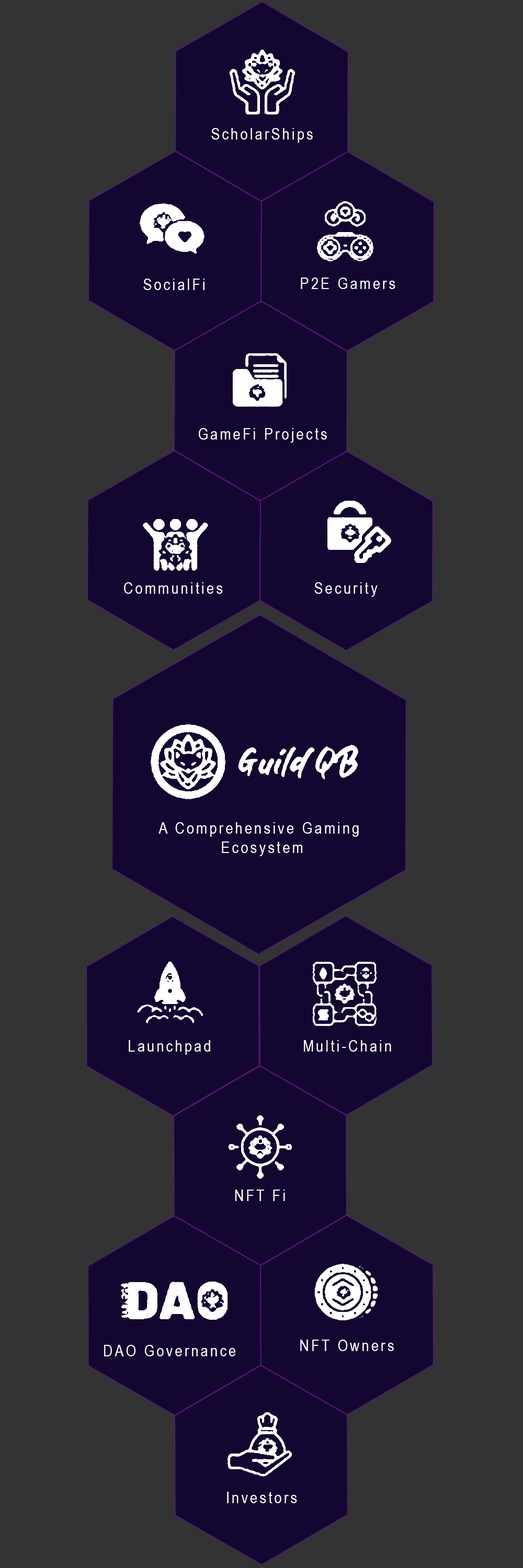
<style>
.page{position:relative;width:523px;height:1568px;background:#333333}
.page>*{position:absolute;margin:0}
.t1{font:16px "ArialNarrow";letter-spacing:0.14em;color:#ffffff}
</style>
<div class="page">
<p class="t1" style="left:211px;top:128px;width:102px;height:15px">ScholarShips</p>
<p class="t1" style="left:143px;top:279px;width:61px;height:11px">SocialFi</p>
<p class="t1" style="left:301px;top:278px;width:94px;height:11px">P2E Gamers</p>
<p class="t1" style="left:199px;top:428px;width:128px;height:15px">GameFi Projects</p>
<p class="t1" style="left:124px;top:582px;width:99px;height:12px">Communities</p>
<p class="t1" style="left:314px;top:582px;width:63px;height:15px">Security</p>
<p class="t1" style="left:158px;top:822px;width:201px;height:34px;text-align:center">A Comprehensive Gaming <br>Ecosystem</p>
<p class="t1" style="left:129px;top:1040px;width:81px;height:15px">Launchpad</p>
<p class="t1" style="left:304px;top:1040px;width:87px;height:12px">Multi-Chain</p>
<p class="t1" style="left:235px;top:1190px;width:50px;height:11px">NFT Fi</p>
<p class="t1" style="left:104px;top:1345px;width:131px;height:11px">DAO Governance</p>
<p class="t1" style="left:300px;top:1340px;width:94px;height:11px">NFT Owners</p>
<p class="t1" style="left:227px;top:1492px;width:70px;height:11px">Investors</p>
</div>
